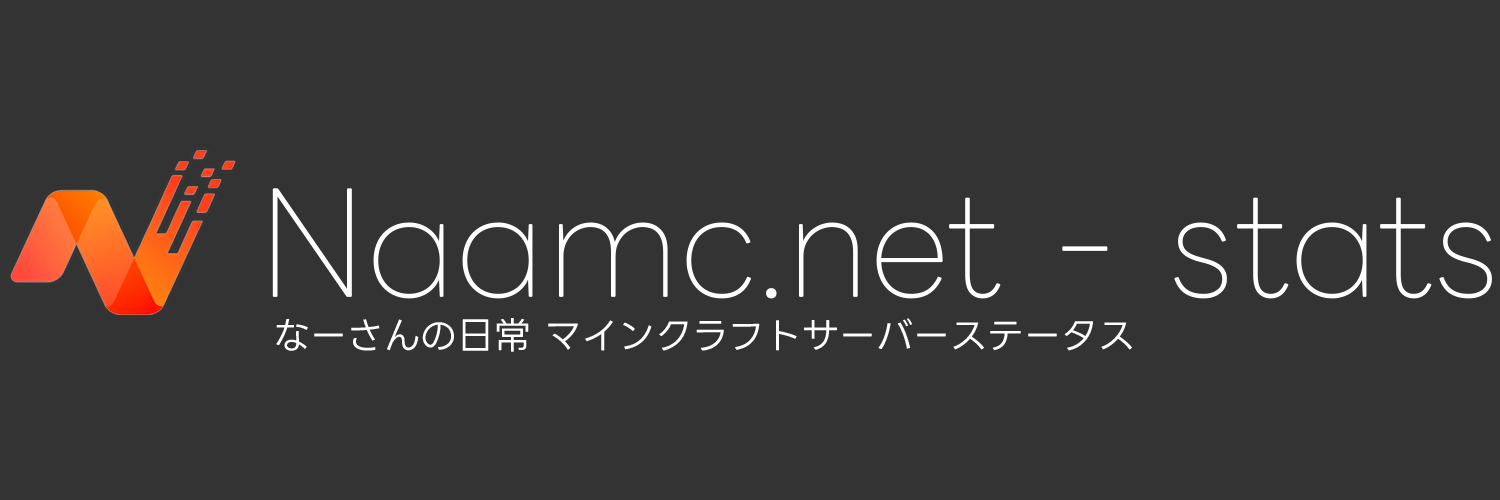
<style>
.page{position:relative;width:1500px;height:500px;background:#333333}
.page>*{position:absolute;margin:0}
.t1{font:140.1px "LINESeedJPApp_TTF-Thin";color:#ffffff}
.t2{font:36.9px "LINESeedJPApp_TTF-Regular";color:#ffffff}
</style>
<div class="page">
<p class="t1" style="left:272px;top:188px;width:1220px;height:111px">Naamc.net - stats</p>
<p class="t2" style="left:276px;top:318px;width:856px;height:34px">なーさんの日常 マインクラフトサーバーステータス</p>
</div>
